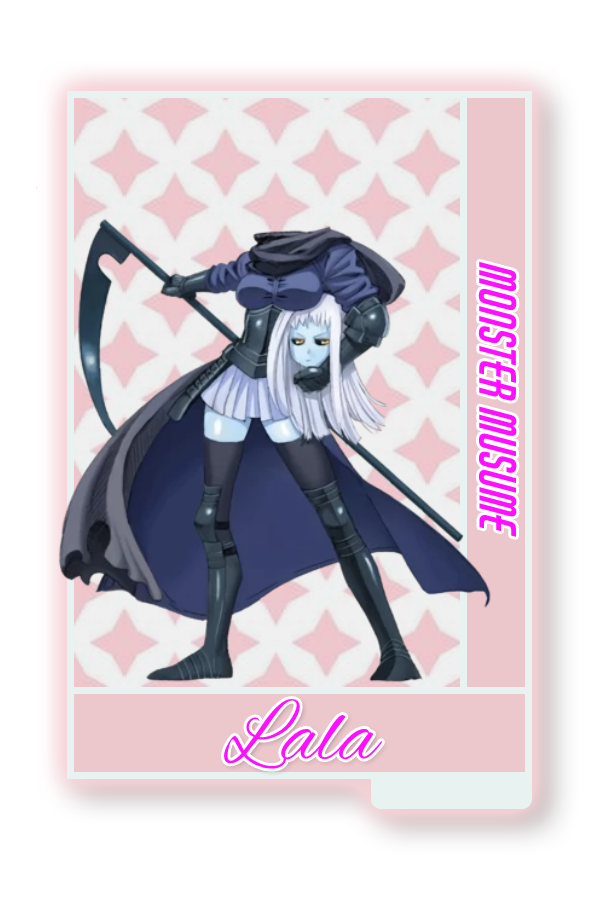
<style>
.page{position:relative;width:600px;height:900px;background:#ffffff}
.page>*{position:absolute;margin:0}
.t1{font:48.8px "AirAmerica-Regular";color:#ff0fff}
.t2{font:88.3px "AlexBrush-Regular";color:#ff0fff}
</style>
<div class="page">
<p class="t1" style="left:478px;top:261px;width:39px;height:276px;rotate:90deg">Monster Musume</p>
<p class="t2" style="left:224px;top:699px;width:158px;height:70px">Lala</p>
</div>
